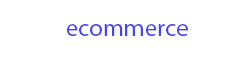
<style>
.page{position:relative;width:246px;height:60px;background:#ffffff}
.page>*{position:absolute;margin:0}
.t1{font:25px "MyriadPro-Regular";color:#4747e7}
</style>
<div class="page">
<p class="t1" style="left:67px;top:24px;width:121px;height:12px">ecommerce</p>
</div>
